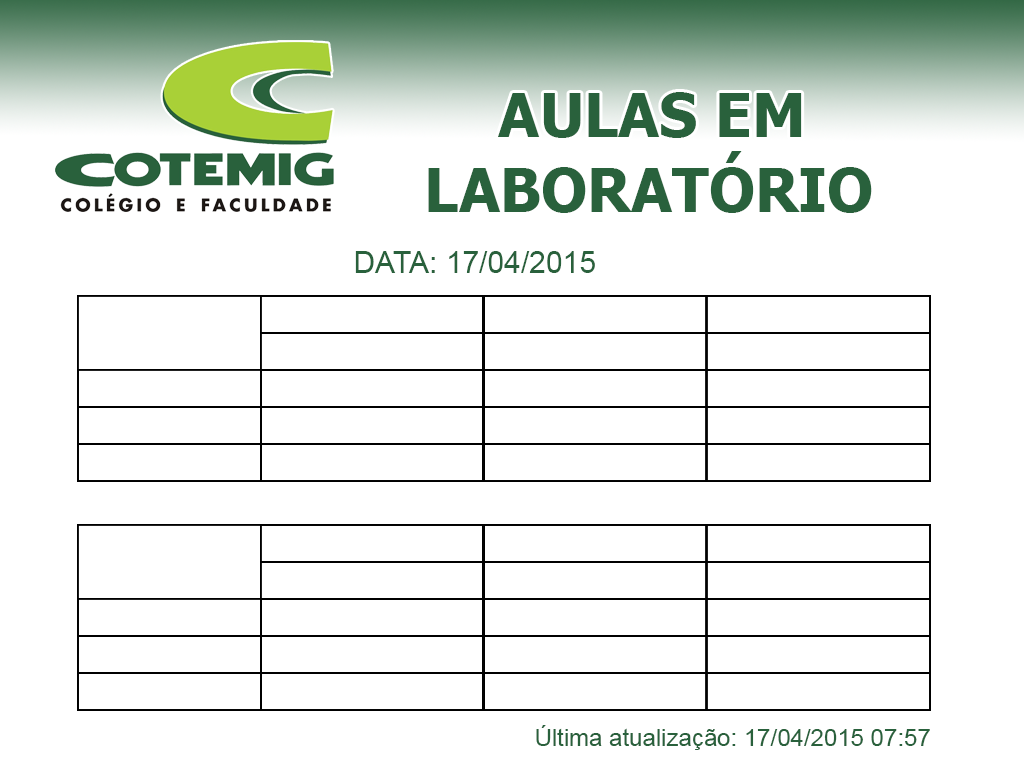
<style>
.page{position:relative;width:1024px;height:768px;background:#ffffff}
.page>*{position:absolute;margin:0}
.t1{font:60px "Tahoma-Bold";color:#29613c}
.t2{font:30px "ArialMT";color:#29613c}
.t3{font:24px "ArialMT";color:#29613c}
</style>
<div class="page">
<p class="t1" style="left:498px;top:92px;width:304px;height:46px">AULAS EM</p>
<p class="t1" style="left:428px;top:151px;width:444px;height:62px">LABORATÓRIO</p>
<p class="t2" style="left:355px;top:251px;width:240px;height:22px">DATA: 17/04/2015</p>
<p class="t3" style="left:536px;top:725px;width:394px;height:25px">Última atualização: 17/04/2015 07:57</p>
</div>
